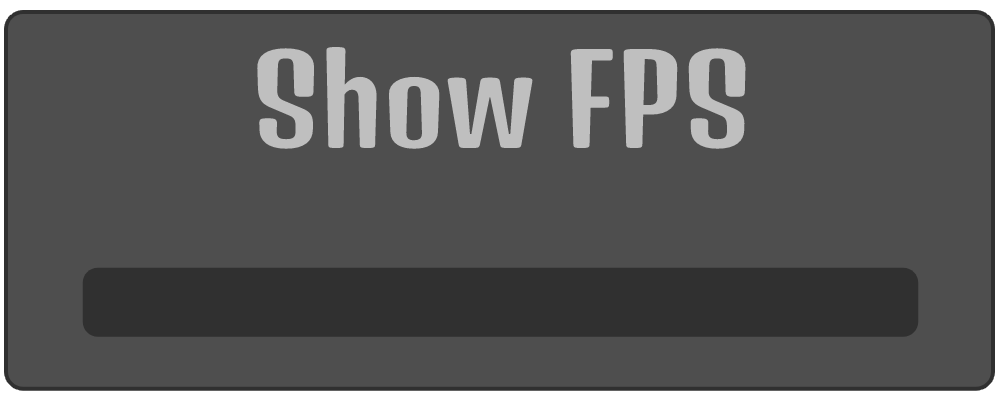
<style>
.page{position:relative;width:1000px;height:400px;background:#4e4e4e}
.page>*{position:absolute;margin:0}
.t1{font:120px "DenkOne-Regular";color:#bfbfbf}
</style>
<div class="page">
<p class="t1" style="left:257px;top:46px;width:489px;height:103px">Show FPS</p>
</div>
